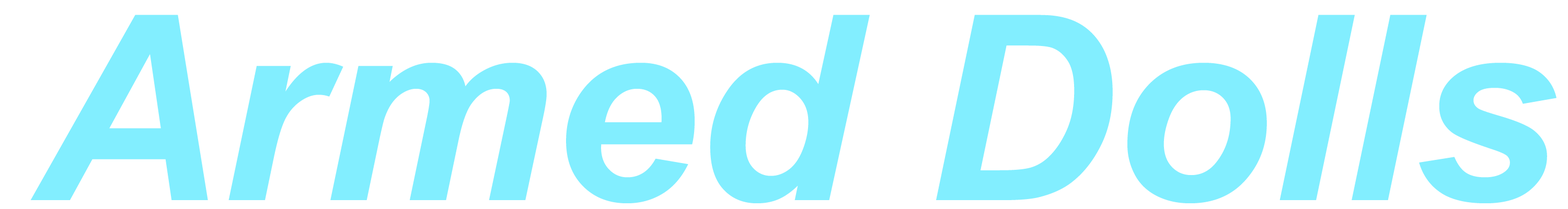
<style>
.page{position:relative;width:1568px;height:209px;background:#ffffff}
.page>*{position:absolute;margin:0}
.t1{font:258.7px "Arial-BoldItalicMT";color:#82eeff}
</style>
<div class="page">
<p class="t1" style="left:30px;top:15px;width:1527px;height:188px">Armed Dolls</p>
</div>
